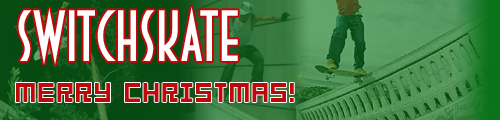
<style>
.page{position:relative;width:500px;height:120px}
.page>*{position:absolute;margin:0}
.t1{font:72px "DecoTechTL";color:#ffffff}
.t2{font:30px "04b03b";color:#bd0909}
</style>
<div class="page">
<p class="t1" style="left:18px;top:7px;width:220px;height:58px">switchskate</p>
<p class="t2" style="left:16px;top:83px;width:278px;height:19px">MERRY CHRISTMAS!</p>
</div>
